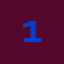
<style>
.page{position:relative;width:64px;height:64px;background:#55082a}
.page>*{position:absolute;margin:0}
.t1{font:45.3px "Corbel-Bold";color:#0041d3}
</style>
<div class="page">
<p class="t1" style="left:23px;top:21px;width:19px;height:21px">1</p>
</div>
